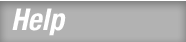
<style>
.page{position:relative;width:186px;height:42px;background:#b2b2b2}
.page>*{position:absolute;margin:0}
.t1{font:30px "HelveticaNeueLTPro-BdCnO";color:#ffffff}
</style>
<div class="page">
<p class="t1" style="left:12px;top:8px;width:54px;height:28px">Help</p>
</div>
